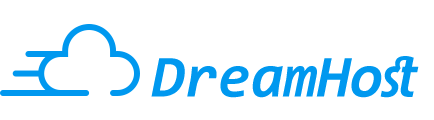
<style>
.page{position:relative;width:434px;height:120px;background:#ffffff}
.page>*{position:absolute;margin:0}
.t1{font:60px "Consolas-BoldItalic";color:#0098ef}
</style>
<div class="page">
<p class="t1" style="left:151px;top:56px;width:268px;height:42px">DreamHost</p>
</div>
